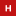
<style>
.page{position:relative;width:16px;height:16px;background:#c11212}
.page>*{position:absolute;margin:0}
.t1{font:9px "Calibri";color:#ffffff;font-weight:bold;scale:1.22 1}
</style>
<div class="page">
<p class="t1" style="left:5px;top:5px;width:6px;height:7px">H</p>
<p class="t1" style="left:5px;top:5px;width:6px;height:7px">H</p>
</div>
